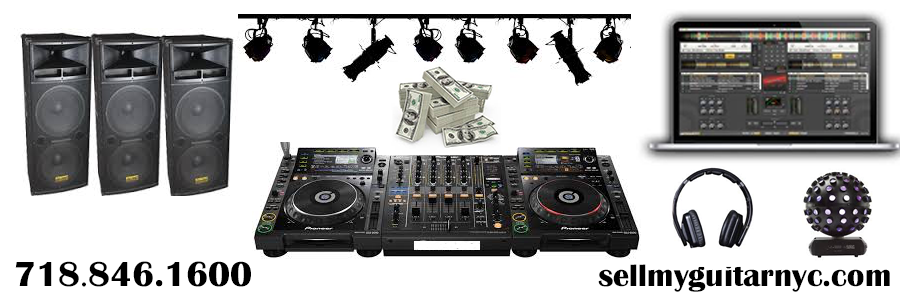
<style>
.page{position:relative;width:900px;height:300px;background:#ffffff}
.page>*{position:absolute;margin:0}
.t1{font:36px "BritannicBold";color:#000000}
.t2{font:36px "MinionPro-Regular";color:#000000}
.t3{font:31.9px "BritannicBold";color:#000000}
</style>
<div class="page">
<p class="t1" style="left:15px;top:261px;width:236px;height:26px">718<span class="t2">.</span>846.1600</p>
<p class="t3" style="left:598px;top:264px;width:292px;height:28px">sellmyguitarnyc.com</p>
</div>
